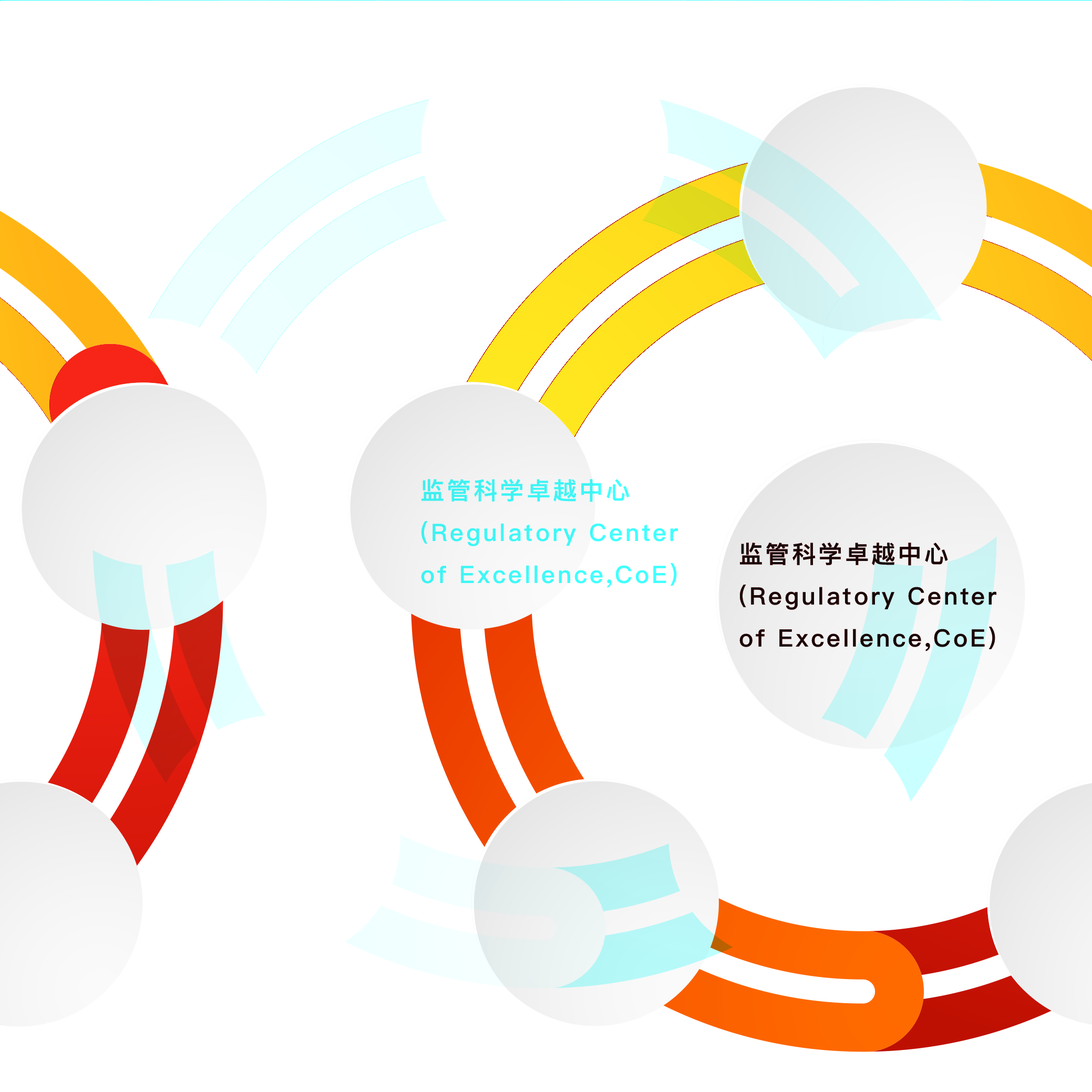
<style>
.page{position:relative;width:1092px;height:1092px;background:#ffffff}
.page>*{position:absolute;margin:0}
.t1{font:24.1px "PingFangSC-Semibold";letter-spacing:0.1em;color:#3ef6f6}
</style>
<div class="page">
<p class="t1" style="left:421px;top:478px;width:257px;height:109px">监管科学卓越中心<br>(Regulatory Center of Excellence,CoE)</p>
</div>
